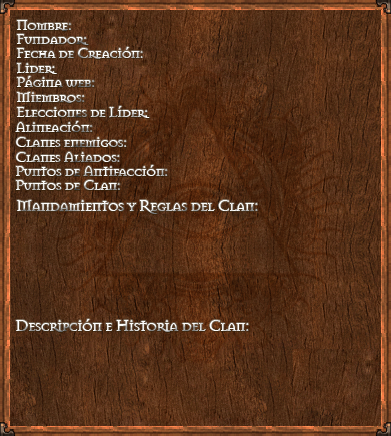
<style>
.page{position:relative;width:391px;height:436px}
.page>*{position:absolute;margin:0}
.t1{font:15.5px "Mason-Regular";letter-spacing:-0.06em}
.t2{font:17.3px "Mason-Regular";letter-spacing:-0.06em}
</style>
<div class="page">
<p class="t1" style="left:17px;top:20px;width:54px;height:11px">Nombre:</p>
<p class="t1" style="left:17px;top:34px;width:72px;height:11px">Fundador:</p>
<p class="t1" style="left:17px;top:47px;width:126px;height:12px">Fecha de Creación:</p>
<p class="t1" style="left:17px;top:63px;width:40px;height:11px">Lider:</p>
<p class="t1" style="left:17px;top:76px;width:78px;height:11px">Página web:</p>
<p class="t1" style="left:17px;top:92px;width:68px;height:11px">Miembros:</p>
<p class="t1" style="left:17px;top:106px;width:133px;height:12px">Elecciones de Líder:</p>
<p class="t1" style="left:15px;top:121px;width:78px;height:11px">Alineación:</p>
<p class="t1" style="left:16px;top:137px;width:111px;height:10px">Clanes enemigos:</p>
<p class="t1" style="left:16px;top:152px;width:104px;height:10px">Clanes Aliados:</p>
<p class="t1" style="left:16px;top:165px;width:152px;height:11px">Puntos de Antifacción:</p>
<p class="t1" style="left:16px;top:180px;width:104px;height:10px">Puntos de Clan:</p>
<p class="t2" style="left:17px;top:200px;width:241px;height:14px">Mandamientos y Reglas del Clan:</p>
<p class="t2" style="left:16px;top:319px;width:233px;height:13px">Descripción e Historia del Clan:</p>
</div>
